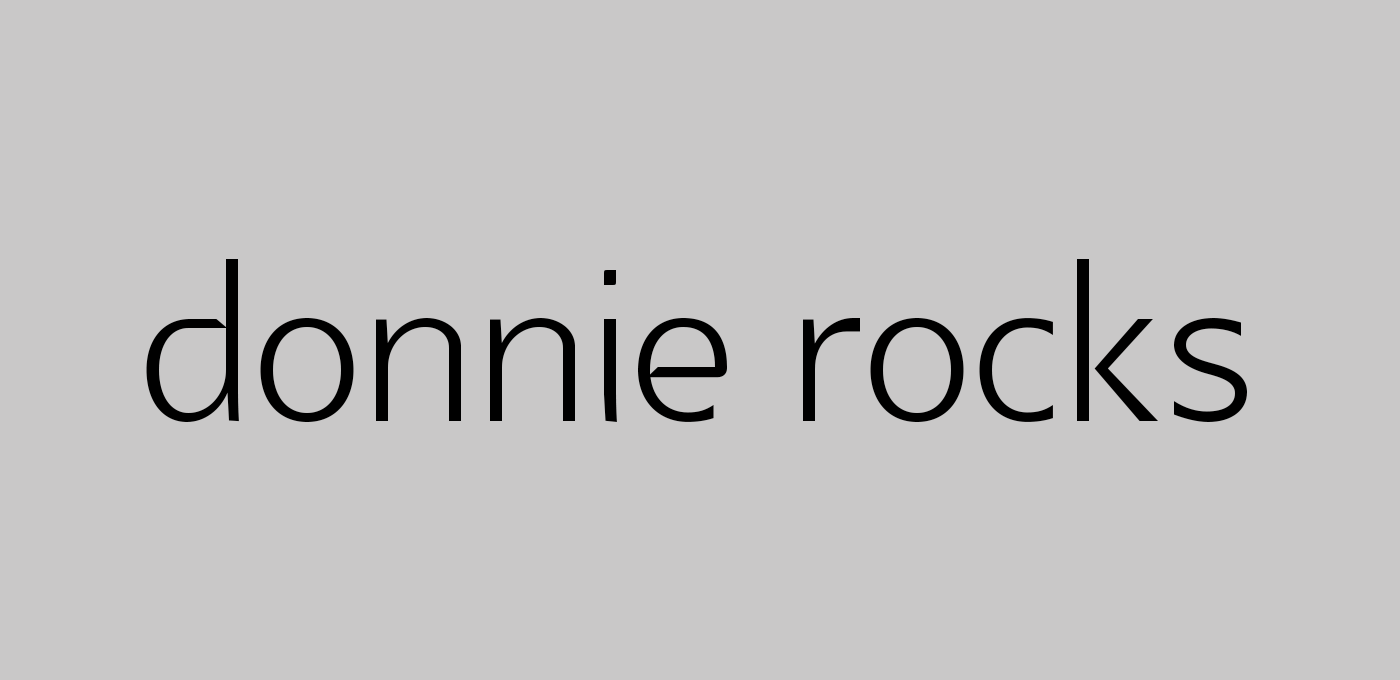
<style>
.page{position:relative;width:1400px;height:680px;background:#c9c8c8}
.page>*{position:absolute;margin:0}
.t1{font:300px "GlametrixLight";color:#000000}
</style>
<div class="page">
<p class="t1" style="left:146px;top:259px;width:1101px;height:163px">donnie rocks</p>
</div>
